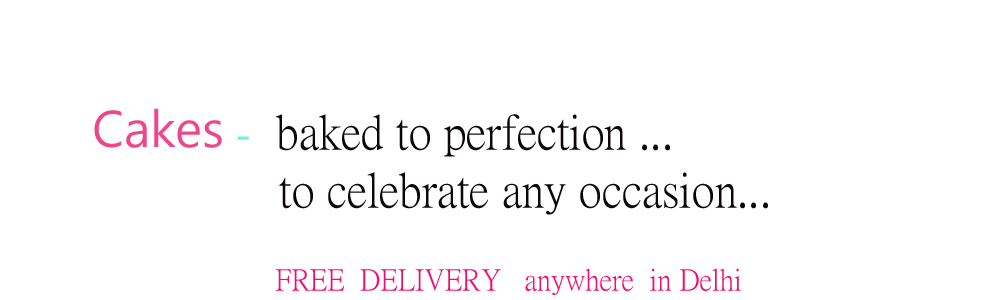
<style>
.page{position:relative;width:1000px;height:300px;background:#ffffff}
.page>*{position:absolute;margin:0}
.t1{font:48px "PMingLiU-ExtB";color:#0c0608}
.t2{font:48px "MicrosoftJhengHeiUIRegular";color:#ee458b}
.t3{font:48px "PMingLiU-ExtB";color:#6cf4df}
.t4{font:30px "PMingLiU-ExtB";color:#f40b6b}
</style>
<div class="page">
<p class="t1" style="left:94px;top:108px;width:674px;height:107px"><span class="t2">Cakes</span><span class="t3"> -  </span>baked to perfection ...<br>               to celebrate any occasion...</p>
<p class="t4" style="left:275px;top:268px;width:466px;height:27px">FREE  DELIVERY   anywhere  in Delhi</p>
</div>
